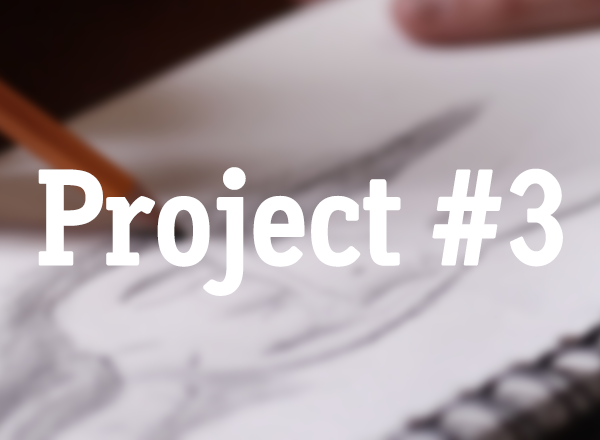
<style>
.page{position:relative;width:600px;height:440px}
.page>*{position:absolute;margin:0}
.t1{font:136px "AauxOfficeBold";letter-spacing:-0.05em;color:#ffffff;font-weight:bold}
</style>
<div class="page">
<p class="t1" style="left:38px;top:167px;width:525px;height:129px">Project #3</p>
</div>
